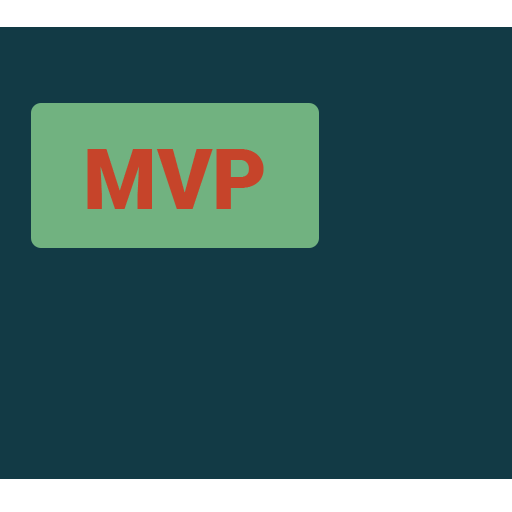
<style>
.page{position:relative;width:512px;height:512px;background:#123a45}
.page>*{position:absolute;margin:0}
.t1{font:84.1px "Roboto-Black";color:#c6442a}
</style>
<div class="page">
<p class="t1" style="left:87px;top:149px;width:177px;height:60px">MVP</p>
</div>
